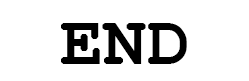
<style>
.page{position:relative;width:249px;height:81px;background:#ffffff}
.page>*{position:absolute;margin:0}
.t1{font:72px "CourierNewPS-BoldMT";color:#000000}
</style>
<div class="page">
<p class="t1" style="left:61px;top:23px;width:126px;height:41px">END</p>
</div>
